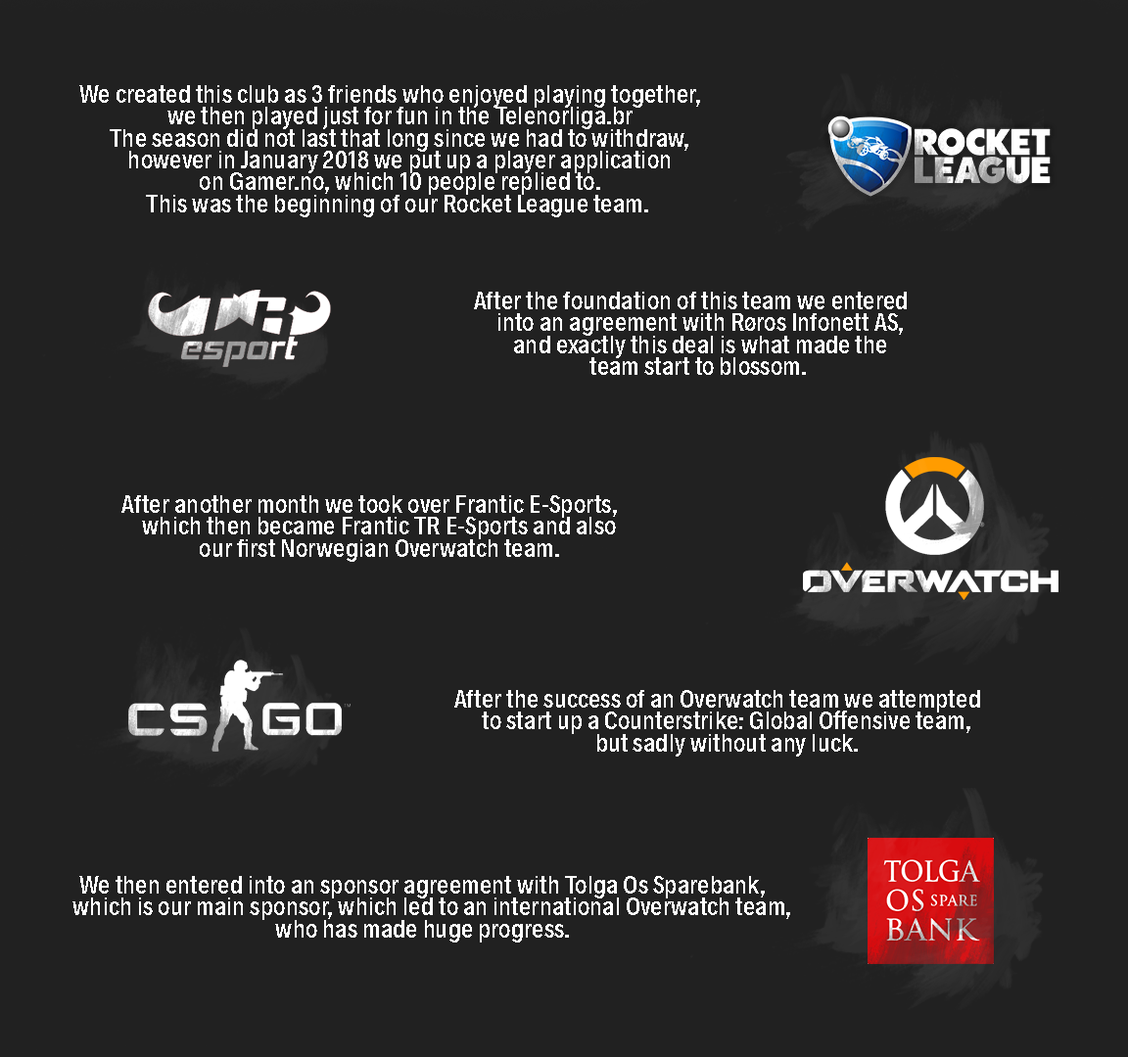
<style>
.page{position:relative;width:1128px;height:1057px;background:#212121}
.page>*{position:absolute;margin:0}
.t1{font:25.8px/20.1px "Radnika-MediumCondensed";color:#ffffff}
</style>
<div class="page">
<p class="t1" style="left:79px;top:85px;width:621px;height:132px;text-align:center">We created this club as 3 friends who enjoyed playing together,<br>    we then played just for fun in the Telenorliga.br<br>    The season did not last that long since we had to withdraw,<br>    however in January 2018 we put up a player application<br>    on Gamer.no, which 10 people replied to.<br>    This was the beginning of our Rocket League team.</p>
<p class="t1" style="left:474px;top:292px;width:433px;height:83px;text-align:center">After the foundation of this team we entered<br>    into an agreement with Røros Infonett AS,<br>    and exactly this deal is what made the<br>    team start to blossom.</p>
<p class="t1" style="left:121px;top:495px;width:496px;height:67px;text-align:center">After another month we took over Frantic E-Sports,<br>    which then became Frantic TR E-Sports and also<br>    our first Norwegian Overwatch team.</p>
<p class="t1" style="left:454px;top:690px;width:526px;height:67px;text-align:center">After the success of an Overwatch team we attempted<br>    to start up a Counterstrike: Global Offensive team,<br>    but sadly without any luck.</p>
<p class="t1" style="left:72px;top:876px;width:718px;height:67px;text-align:center">We then entered into an sponsor agreement with Tolga Os Sparebank,<br>    which is our main sponsor, which led to an international Overwatch team,<br>who has made huge progress.</p>
</div>
